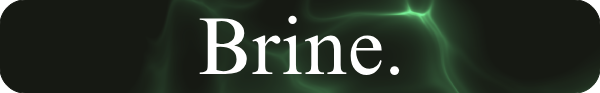
<style>
.page{position:relative;width:600px;height:93px;background:#161913}
.page>*{position:absolute;margin:0}
.t1{font:81px "TimesNRCyrMT";color:#ffffff}
</style>
<div class="page">
<p class="t1" style="left:199px;top:15px;width:201px;height:61px">Brine.</p>
</div>
